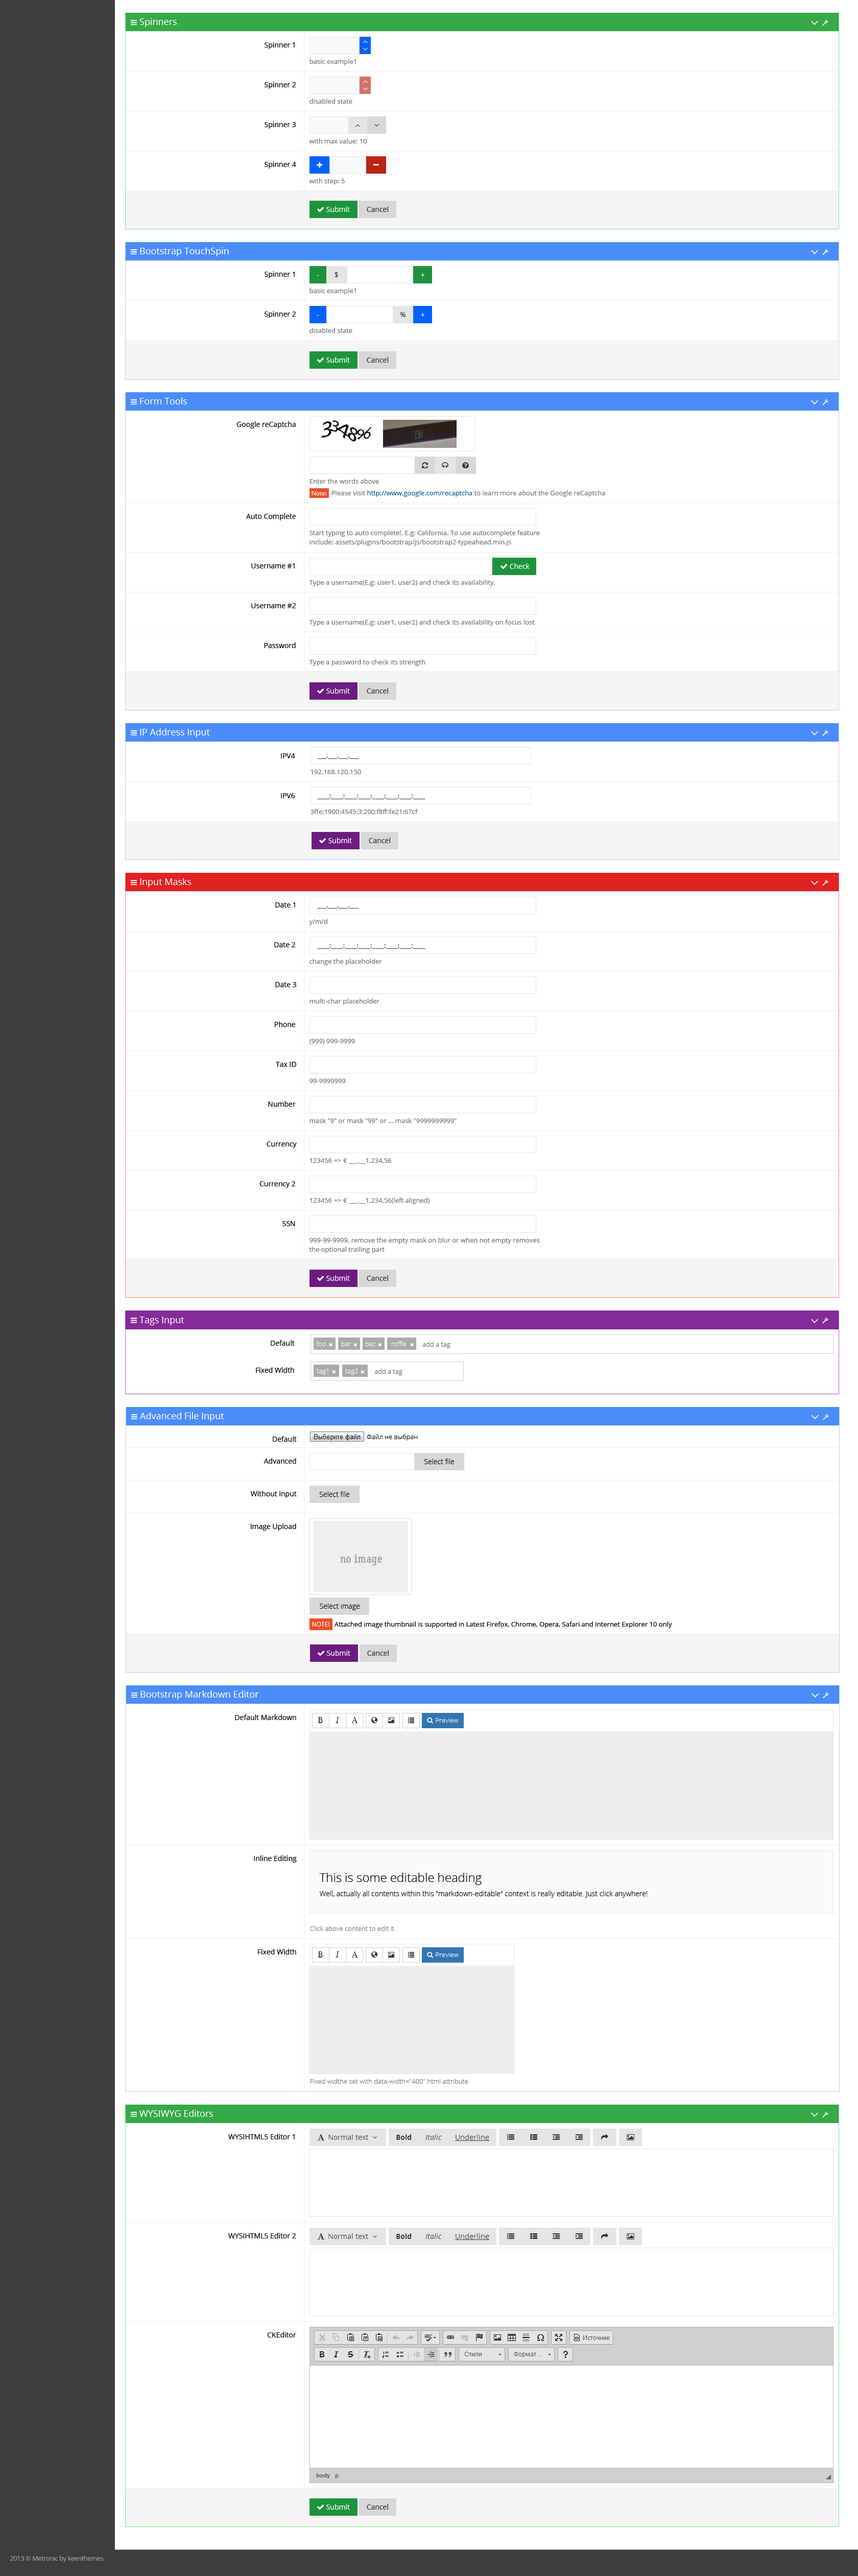
<style>
.page{position:relative;width:858px;height:2576px;background:#ffffff}
.page>*{position:absolute;margin:0}
.t1{font:9.2px "OpenSans";color:#ffffff}
.t2{font:7.1px "OpenSans";color:#000000}
.t3{font:6.6px "OpenSans";color:#737373}
.t4{font:7.1px "OpenSans";color:#fefefe}
.t5{font:7.1px "OpenSans";color:#333333}
.t6{font:7.1px "OpenSans";color:#ffffff}
.t7{font:7.1px "OpenSans";color:#363636}
.t8{font:6.6px/11.5px "OpenSans";color:#737373}
.t9{font:6.1px/11.5px "OpenSans";color:#ffffff}
.t10{font:6.6px/11.5px "OpenSans";color:#0d638f}
.t11{font:6.6px/9px "OpenSans";color:#737373}
.t12{font:6.6px "OpenSans";color:#333333}
.t13{font:6.6px "OpenSans-Light";color:#ffffff}
.t14{font:6.6px "OpenSans-Light";color:#666666}
.t15{font:6.6px "OpenSans-Light";color:#000000}
.t16{font:7.1px "OpenSans-Light";color:#000000}
.t17{font:6.6px "OpenSans";color:#000000}
.t18{font:6.1px "OpenSans";color:#ffffff;text-transform:uppercase}
.t19{font:6.6px "OpenSans-Light";color:#fffefe}
.t20{font:7.1px/14.1px "OpenSans-Light";color:#000000}
.t21{font:12.3px "OpenSans-Light";color:#000000}
.t22{font:6.6px "OpenSans-Light";color:#737373}
.t23{font:6.6px "OpenSans";letter-spacing:-0.04em;color:#999999}
</style>
<div class="page">
<p class="t1" style="left:139px;top:18px;width:38px;height:9px">Spinners</p>
<p class="t2" style="left:265px;top:42px;width:30px;height:7px">Spinner 1</p>
<p class="t3" style="left:309px;top:59px;width:47px;height:6px">basic example1</p>
<p class="t2" style="left:265px;top:82px;width:31px;height:7px">Spinner 2</p>
<p class="t3" style="left:309px;top:99px;width:43px;height:5px">disabled state</p>
<p class="t2" style="left:265px;top:122px;width:31px;height:7px">Spinner 3</p>
<p class="t3" style="left:309px;top:138px;width:58px;height:6px">with max value: 10</p>
<p class="t2" style="left:265px;top:161px;width:31px;height:8px">Spinner 4</p>
<p class="t3" style="left:309px;top:178px;width:36px;height:7px">with step: 5</p>
<p class="t4" style="left:326px;top:206px;width:24px;height:6px">Submit</p>
<p class="t5" style="left:367px;top:206px;width:21px;height:6px">Cancel</p>
<p class="t1" style="left:140px;top:247px;width:89px;height:9px">Bootstrap TouchSpin</p>
<p class="t2" style="left:265px;top:271px;width:30px;height:7px">Spinner 1</p>
<p class="t6" style="left:317px;top:275px;width:2px;height:1px">-</p>
<p class="t7" style="left:335px;top:272px;width:3px;height:6px">$</p>
<p class="t6" style="left:421px;top:273px;width:4px;height:4px">+</p>
<p class="t3" style="left:309px;top:288px;width:47px;height:7px">basic example1</p>
<p class="t2" style="left:265px;top:311px;width:31px;height:7px">Spinner 2</p>
<p class="t6" style="left:317px;top:315px;width:2px;height:1px">-</p>
<p class="t7" style="left:400px;top:312px;width:6px;height:5px">%</p>
<p class="t6" style="left:421px;top:313px;width:4px;height:4px">+</p>
<p class="t3" style="left:309px;top:328px;width:43px;height:5px">disabled state</p>
<p class="t4" style="left:326px;top:357px;width:24px;height:6px">Submit</p>
<p class="t5" style="left:367px;top:357px;width:21px;height:6px">Cancel</p>
<p class="t1" style="left:140px;top:397px;width:47px;height:7px">Form Tools</p>
<p class="t2" style="left:236px;top:421px;width:60px;height:7px">Google reCaptcha</p>
<p class="t8" style="left:309px;top:479px;width:296px;height:18px"><span class="t3">Enter the words above<br></span><span class="t9">Note:   </span>Please visit <span class="t10">http://www.google.com/recaptcha</span> to learn more about the Google reCaptcha</p>
<p class="t2" style="left:246px;top:513px;width:50px;height:7px">Auto Complete</p>
<p class="t3" style="left:309px;top:530px;width:231px;height:16px">Start typing to auto complete!. E.g: California. To use autocomplete feature <br><span class="t11">include: assets/plugins/bootstrap/js/bootstrap2-typeahead.min.js</span></p>
<p class="t2" style="left:251px;top:563px;width:44px;height:5px">Username #1</p>
<p class="t4" style="left:510px;top:563px;width:20px;height:6px">Check</p>
<p class="t3" style="left:309px;top:580px;width:186px;height:6px">Type a username(E.g: user1, user2) and check its availability.</p>
<p class="t2" style="left:251px;top:603px;width:45px;height:5px">Username #2</p>
<p class="t3" style="left:309px;top:619px;width:226px;height:7px">Type a username(E.g: user1, user2) and check its availability on focus lost</p>
<p class="t2" style="left:264px;top:642px;width:32px;height:6px">Password</p>
<p class="t3" style="left:309px;top:659px;width:116px;height:7px">Type a password to check its strength</p>
<p class="t4" style="left:326px;top:688px;width:24px;height:6px">Submit</p>
<p class="t5" style="left:367px;top:688px;width:21px;height:6px">Cancel</p>
<p class="t1" style="left:140px;top:728px;width:70px;height:9px">IP Address Input</p>
<p class="t2" style="left:281px;top:753px;width:14px;height:5px">IPV4</p>
<p class="t12" style="left:317px;top:757px;width:42px;height:2px">___.___.___.___</p>
<p class="t3" style="left:311px;top:770px;width:50px;height:4px">192.168.120.150</p>
<p class="t2" style="left:281px;top:793px;width:14px;height:5px">IPV6</p>
<p class="t12" style="left:317px;top:795px;width:108px;height:4px">____:____:____:____:____:____:____:____</p>
<p class="t3" style="left:311px;top:809px;width:107px;height:5px">3ffe:1900:4545:3:200:f8ff:fe21:67cf</p>
<p class="t4" style="left:328px;top:838px;width:24px;height:5px">Submit</p>
<p class="t5" style="left:369px;top:838px;width:21px;height:5px">Cancel</p>
<p class="t1" style="left:140px;top:878px;width:52px;height:9px">Input Masks</p>
<p class="t2" style="left:275px;top:902px;width:20px;height:6px">Date 1</p>
<p class="t12" style="left:317px;top:907px;width:42px;height:2px">___.___.___.___</p>
<p class="t3" style="left:309px;top:919px;width:18px;height:6px">y/m/d</p>
<p class="t2" style="left:274px;top:942px;width:22px;height:5px">Date 2</p>
<p class="t12" style="left:317px;top:944px;width:108px;height:5px">____:____:____:____:____:____:____:____</p>
<p class="t3" style="left:309px;top:959px;width:73px;height:6px">change the placeholder</p>
<p class="t2" style="left:275px;top:982px;width:21px;height:5px">Date 3</p>
<p class="t3" style="left:309px;top:998px;width:70px;height:7px">multi-char placeholder</p>
<p class="t2" style="left:275px;top:1021px;width:20px;height:6px">Phone</p>
<p class="t3" style="left:309px;top:1039px;width:46px;height:5px">(999) 999-9999</p>
<p class="t2" style="left:276px;top:1062px;width:20px;height:5px">Tax ID</p>
<p class="t3" style="left:309px;top:1079px;width:37px;height:4px">99-9999999</p>
<p class="t2" style="left:268px;top:1101px;width:28px;height:6px">Number</p>
<p class="t3" style="left:309px;top:1118px;width:148px;height:5px">mask "9" or mask "99" or ... mask "9999999999"</p>
<p class="t2" style="left:267px;top:1141px;width:30px;height:7px">Currency</p>
<p class="t3" style="left:309px;top:1158px;width:83px;height:6px">123456 =&gt; € ___.__1.234,56</p>
<p class="t2" style="left:259px;top:1181px;width:37px;height:7px">Currency 2</p>
<p class="t3" style="left:309px;top:1198px;width:121px;height:6px">123456 =&gt; € ___.__1.234,56(left aligned)</p>
<p class="t2" style="left:282px;top:1221px;width:13px;height:5px">SSN</p>
<p class="t3" style="left:309px;top:1237px;width:231px;height:16px">999-99-9999. remove the empty mask on blur or when not empty removes <br><span class="t11">the optional trailing part</span></p>
<p class="t4" style="left:326px;top:1275px;width:24px;height:6px">Submit</p>
<p class="t5" style="left:367px;top:1275px;width:21px;height:6px">Cancel</p>
<p class="t1" style="left:139px;top:1317px;width:45px;height:8px">Tags Input</p>
<p class="t2" style="left:271px;top:1340px;width:24px;height:6px">Default</p>
<p class="t13" style="left:316px;top:1341px;width:10px;height:5px">foo</p>
<p class="t13" style="left:341px;top:1341px;width:10px;height:5px">bar</p>
<p class="t13" style="left:366px;top:1341px;width:10px;height:5px">baz</p>
<p class="t13" style="left:392px;top:1341px;width:15px;height:5px">roffle</p>
<p class="t14" style="left:423px;top:1342px;width:27px;height:6px">add a tag</p>
<p class="t2" style="left:256px;top:1367px;width:38px;height:6px">Fixed Width</p>
<p class="t13" style="left:317px;top:1369px;width:11px;height:6px">tag1</p>
<p class="t13" style="left:345px;top:1369px;width:13px;height:6px">tag2</p>
<p class="t14" style="left:375px;top:1369px;width:27px;height:6px">add a tag</p>
<p class="t1" style="left:140px;top:1412px;width:84px;height:9px">Advanced File Input</p>
<p class="t2" style="left:273px;top:1436px;width:24px;height:6px">Default</p>
<p class="t15" style="left:367px;top:1434px;width:51px;height:7px">Файл не выбран</p>
<p class="t2" style="left:264px;top:1458px;width:32px;height:6px">Advanced</p>
<p class="t16" style="left:424px;top:1459px;width:30px;height:5px">Select file</p>
<p class="t2" style="left:250px;top:1491px;width:47px;height:7px">Without input</p>
<p class="t16" style="left:319px;top:1491px;width:30px;height:6px">Select file</p>
<p class="t2" style="left:251px;top:1523px;width:45px;height:8px">Image Upload</p>
<p class="t16" style="left:320px;top:1603px;width:40px;height:7px">Select image</p>
<p class="t17" style="left:312px;top:1621px;width:360px;height:7px"><span class="t18">Note!   </span>Attached image thumbnail is supported in Latest Firefox, Chrome, Opera, Safari and Internet Explorer 10 only</p>
<p class="t4" style="left:327px;top:1650px;width:23px;height:6px">Submit</p>
<p class="t5" style="left:367px;top:1650px;width:22px;height:6px">Cancel</p>
<p class="t1" style="left:140px;top:1690px;width:119px;height:10px">Bootstrap Markdown Editor</p>
<p class="t2" style="left:235px;top:1714px;width:61px;height:6px">Default Markdown</p>
<p class="t19" style="left:436px;top:1718px;width:23px;height:5px">Preview</p>
<p class="t2" style="left:254px;top:1855px;width:43px;height:8px">Inline Editing</p>
<p class="t20" style="left:319px;top:1873px;width:329px;height:25px"><span class="t21">This is some editable heading<br></span>Well, actually all contents within this "markdown-editable" context is really editable. Just click anywhere!</p>
<p class="t22" style="left:310px;top:1926px;width:84px;height:5px"><span class="t15"><br></span>Click above content to edit it</p>
<p class="t2" style="left:258px;top:1949px;width:38px;height:5px">Fixed Width</p>
<p class="t19" style="left:436px;top:1952px;width:23px;height:5px">Preview</p>
<p class="t22" style="left:310px;top:2079px;width:158px;height:5px">Fixed widthe set with data-width="400" html attribute</p>
<p class="t1" style="left:139px;top:2110px;width:74px;height:7px">WYSIWYG Editors</p>
<p class="t2" style="left:228px;top:2134px;width:67px;height:5px">WYSIHTML5 Editor 1</p>
<p class="t2" style="left:228px;top:2233px;width:68px;height:5px">WYSIHTML5 Editor 2</p>
<p class="t2" style="left:268px;top:2332px;width:28px;height:6px">CKEditor</p>
<p class="t4" style="left:326px;top:2504px;width:24px;height:6px">Submit</p>
<p class="t5" style="left:367px;top:2504px;width:21px;height:6px">Cancel</p>
<p class="t23" style="left:10px;top:2556px;width:95px;height:6px">2013 © Metronic by keenthemes.</p>
</div>
